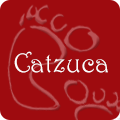
<style>
.page{position:relative;width:120px;height:120px;background:#9e0b0f}
.page>*{position:absolute;margin:0}
.t1{font:27.6px "Harrington";color:#fdfdfd}
</style>
<div class="page">
<p class="t1" style="left:14px;top:51px;width:94px;height:22px">Catzuca</p>
</div>
